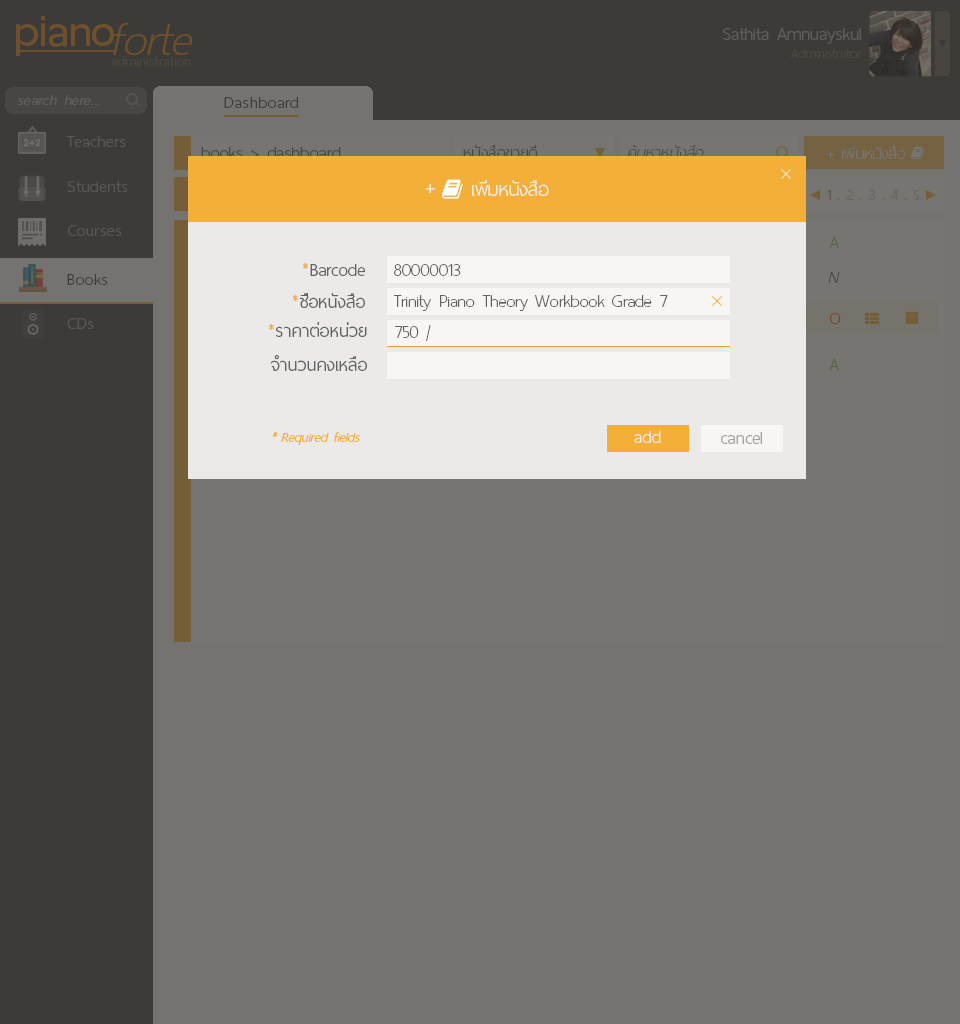
<style>
.page{position:relative;width:960px;height:1024px;background:#75736f}
.page>*{position:absolute;margin:0}
.t1{font:60px "ThaiSansNeue-SemiBold";letter-spacing:-0.005em;color:#6e502c}
.t2{font:62px "ThaiSansNeue-ExtraLightItalic";letter-spacing:-0.005em;color:#6e502c}
.t3{font:24px "ThaiSansNeue-Light";letter-spacing:-0.005em;color:#5f5d5a}
.t4{font:18px "ThaiSansNeue-Light";letter-spacing:-0.005em;color:#4a4843}
.t5{font:18.5px "ThaiSansNeue-ExtraLight";letter-spacing:0.025em;color:#4a4843}
.t6{font:20px "ThaiSansNeue-LightItalic";letter-spacing:0.025em;color:#605e5a}
.t7{font:22px "ThaiSansNeue-Light";letter-spacing:0.025em;color:#3d3b37}
.t8{font:22px "ThaiSansNeue-Light";letter-spacing:0.025em;color:#595754}
.t9{font:24px "ThaiSansNeue-Light";letter-spacing:-0.005em;color:#484744}
.t10{font:22px "ThaiSansNeue-UltraLight";letter-spacing:0.01em;color:#484744}
.t11{font:22px "ThaiSansNeue-UltraLightItalic";letter-spacing:0.01em}
.t12{font:22px "ThaiSansNeue-UltraLight";color:#777572}
.t13{font:30px "ThaiSansNeue-Light";letter-spacing:-0.005em;color:#ebeae8}
.t14{font:26px "ThaiSansNeue-Light";letter-spacing:-0.005em;color:#ebeae8}
.t15{font:20px "ThaiSansNeue-Light";color:#686663}
.t16{font:22px "ThaiSansNeue-UltraLight";color:#52633d}
.t17{font:24px "ThaiSansNeue-Light";color:#636363}
.t18{font:24px "ThaiSansNeue-Light";color:#f3af37}
.t19{font:24px "ThaiSansNeue-UltraLight";color:#636363}
.t20{font:22px "ThaiSansNeue-UltraLightItalic";color:#484744}
.t21{font:22px "ThaiSansNeue-UltraLight";color:#6e4529}
.t22{font:24px "ThaiSansNeue-UltraLightItalic";color:#636363}
.t23{font:18px "ThaiSansNeue-LightItalic";color:#f3af37}
.t24{font:24px "ThaiSansNeue-Light";letter-spacing:-0.005em;color:#ebeae8}
.t25{font:24px "ThaiSansNeue-Light";color:#a2a1a0}
</style>
<div class="page">
<p class="t1" style="left:16px;top:16px;width:98px;height:40px">piano</p>
<p class="t2" style="left:113px;top:23px;width:80px;height:32px">forte</p>
<p class="t3" style="left:723px;top:28px;width:138px;height:16px">Sathita Amnuayskul</p>
<p class="t4" style="left:791px;top:49px;width:71px;height:9px">Administrator</p>
<p class="t5" style="left:111px;top:56px;width:80px;height:10px">administration</p>
<p class="t6" style="left:17px;top:95px;width:83px;height:10px">search here...</p>
<p class="t7" style="left:224px;top:97px;width:74px;height:11px">Dashboard</p>
<p class="t8" style="left:66px;top:136px;width:60px;height:11px">Teachers</p>
<p class="t9" style="left:201px;top:147px;width:140px;height:12px">books &gt; dashboard</p>
<p class="t10" style="left:463px;top:145px;width:74px;height:13px">หนังสือขายดี</p>
<p class="t11" style="left:627px;top:145px;width:77px;height:13px">ค้นหาหนังสือ</p>
<p class="t12" style="left:827px;top:146px;width:78px;height:13px">+ เพิ่มหนังสือ</p>
<p class="t8" style="left:67px;top:181px;width:61px;height:11px">Students</p>
<p class="t13" style="left:425px;top:184px;width:10px;height:9px">+</p>
<p class="t14" style="left:472px;top:180px;width:77px;height:16px">เพิ่มหนังสือ</p>
<p class="t15" style="left:827px;top:190px;width:93px;height:10px">1 . 2 . 3 . 4 . 5</p>
<p class="t8" style="left:68px;top:225px;width:54px;height:11px">Courses</p>
<p class="t16" style="left:830px;top:237px;width:9px;height:11px">A</p>
<p class="t17" style="left:302px;top:263px;width:63px;height:13px"><span class="t18">*</span>Barcode</p>
<p class="t19" style="left:394px;top:264px;width:67px;height:12px">80000013</p>
<p class="t7" style="left:67px;top:274px;width:41px;height:11px">Books</p>
<p class="t20" style="left:828px;top:272px;width:12px;height:11px">N</p>
<p class="t17" style="left:292px;top:293px;width:73px;height:15px"><span class="t18">*</span>ชื่อหนังสือ</p>
<p class="t19" style="left:393px;top:295px;width:275px;height:16px">Trinity Piano Theory Workbook Grade 7</p>
<p class="t8" style="left:67px;top:318px;width:27px;height:11px">CDs</p>
<p class="t21" style="left:830px;top:313px;width:11px;height:11px">O</p>
<p class="t17" style="left:268px;top:322px;width:99px;height:15px"><span class="t18">*</span>ราคาต่อหน่วย</p>
<p class="t19" style="left:395px;top:325px;width:36px;height:16px">750 <span class="t22">|</span></p>
<p class="t17" style="left:270px;top:355px;width:97px;height:16px">จำนวนคงเหลือ</p>
<p class="t16" style="left:830px;top:359px;width:9px;height:11px">A</p>
<p class="t23" style="left:272px;top:432px;width:88px;height:13px">* Required fields</p>
<p class="t24" style="left:634px;top:431px;width:27px;height:12px">add</p>
<p class="t25" style="left:721px;top:432px;width:41px;height:12px">cancel</p>
</div>
